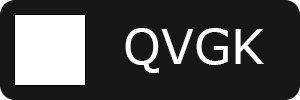
<style>
.page{position:relative;width:300px;height:100px;background:#171717}
.page>*{position:absolute;margin:0}
.t1{font:48px "MSReferenceSansSerif";color:#ffffff}
</style>
<div class="page">
<p class="t1" style="left:125px;top:28px;width:139px;height:45px">QVGK</p>
</div>
